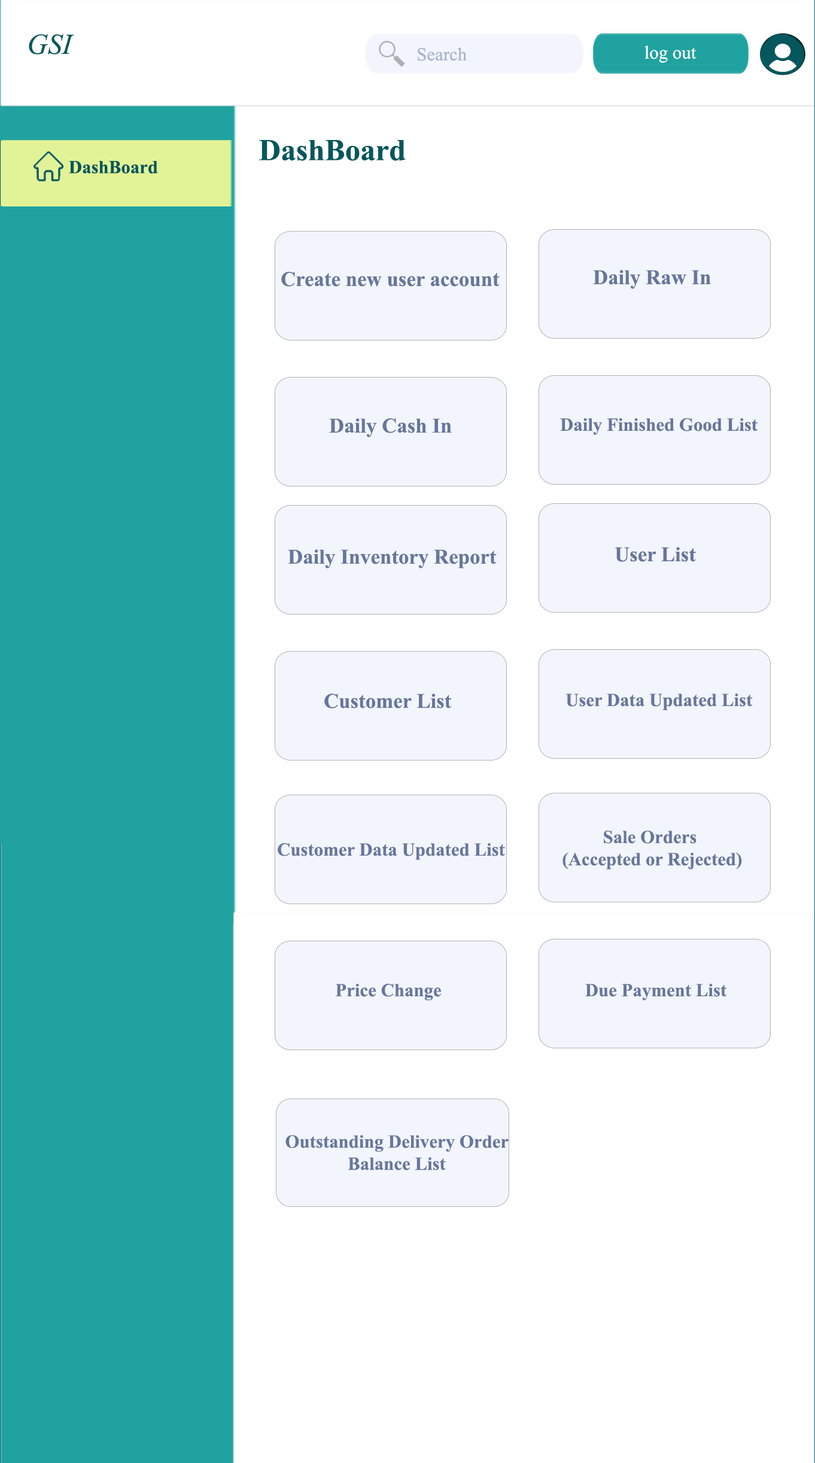
<style>
.page{position:relative;width:815px;height:1463px;background:#ffffff}
.page>*{position:absolute;margin:0}
.t1{font:28.7px "TimesNewRomanPS-ItalicMT";color:#02575c}
.t2{font:18.5px "TimesNewRomanPSMT";color:#a6b3d0}
.t3{font:18.5px "TimesNewRomanPSMT";color:#ffffff}
.t4{font:30.4px "TimesNewRomanPS-BoldMT";color:#02575c}
.t5{font:18.5px "TimesNewRomanPS-BoldMT";color:#02575c}
.t6{font:20.9px "TimesNewRomanPS-BoldMT";color:#67769b}
.t7{font:18.5px "TimesNewRomanPS-BoldMT";color:#67769b}
</style>
<div class="page">
<p class="t1" style="left:29px;top:34px;width:45px;height:20px">GSI</p>
<p class="t2" style="left:418px;top:47px;width:49px;height:14px">Search</p>
<p class="t3" style="left:644px;top:45px;width:53px;height:18px">log out</p>
<p class="t4" style="left:259px;top:140px;width:147px;height:21px">DashBoard</p>
<p class="t5" style="left:69px;top:161px;width:89px;height:13px">DashBoard</p>
<p class="t6" style="left:593px;top:270px;width:118px;height:19px">Daily Raw In</p>
<p class="t6" style="left:281px;top:272px;width:219px;height:15px">Create new user account</p>
<p class="t6" style="left:329px;top:418px;width:123px;height:19px">Daily Cash In</p>
<p class="t7" style="left:560px;top:418px;width:198px;height:17px">Daily Finished Good List</p>
<p class="t6" style="left:288px;top:549px;width:209px;height:19px">Daily Inventory Report</p>
<p class="t6" style="left:615px;top:547px;width:81px;height:15px">User List</p>
<p class="t6" style="left:324px;top:694px;width:127px;height:15px">Customer List</p>
<p class="t7" style="left:565px;top:694px;width:188px;height:16px">User Data Updated List</p>
<p class="t7" style="left:562px;top:831px;width:180px;height:38px;text-align:center">Sale Orders<br> (Accepted or Rejected)</p>
<p class="t7" style="left:278px;top:843px;width:227px;height:17px">Customer Data Updated List</p>
<p class="t7" style="left:336px;top:984px;width:105px;height:17px">Price Change</p>
<p class="t7" style="left:585px;top:984px;width:141px;height:17px">Due Payment List</p>
<p class="t7" style="left:285px;top:1135px;width:224px;height:35px;text-align:center">Outstanding Delivery Order<br>Balance List</p>
</div>
